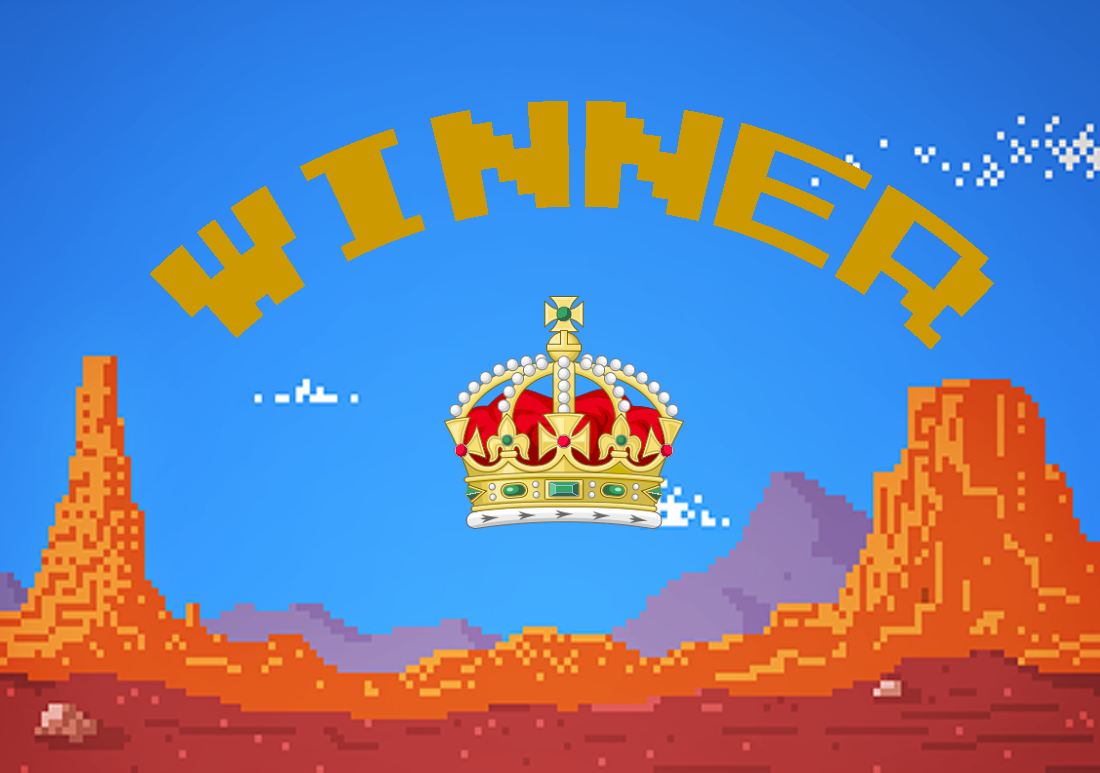
<style>
.page{position:relative;width:1100px;height:773px}
.page>*{position:absolute;margin:0}
.t1{font:150px "Zig";color:#cc9900}
</style>
<div class="page">
<p class="t1" style="left:150px;top:101px;width:844px;height:248px">winner</p>
</div>
